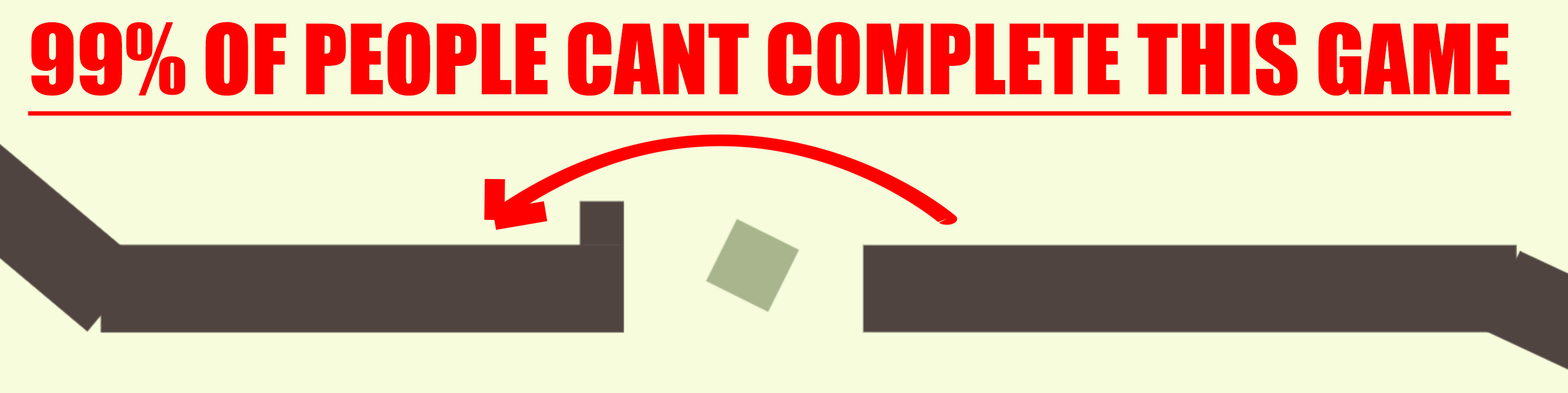
<style>
.page{position:relative;width:1568px;height:393px;background:#f6fcdc}
.page>*{position:absolute;margin:0}
.t1{font:89.3px "Impact";color:#ff0000;text-decoration:underline}
</style>
<div class="page">
<p class="t1" style="left:28px;top:22px;width:1483px;height:94px">99% OF PEOPLE CANT COMPLETE THIS GAME</p>
</div>
